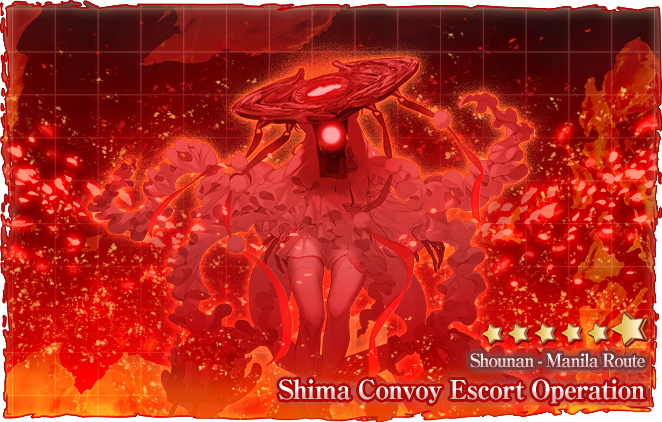
<style>
.page{position:relative;width:662px;height:422px}
.page>*{position:absolute;margin:0}
.t1{font:18px "RyuminPro-ExBold";letter-spacing:-0.08em}
.t2{font:26px "RyuminPro-ExBold";letter-spacing:-0.04em}
</style>
<div class="page">
<p class="t1" style="left:470px;top:353px;width:175px;height:15px">Shounan - Manila Route</p>
<p class="t2" style="left:279px;top:379px;width:366px;height:25px">Shima Convoy Escort Operation</p>
</div>
